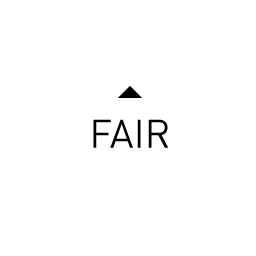
<style>
.page{position:relative;width:256px;height:256px;background:#ffffff}
.page>*{position:absolute;margin:0}
.t1{font:39.2px "DIN-Regular";color:#000000}
</style>
<div class="page">
<p class="t1" style="left:93px;top:119px;width:76px;height:29px">FAIR</p>
</div>
